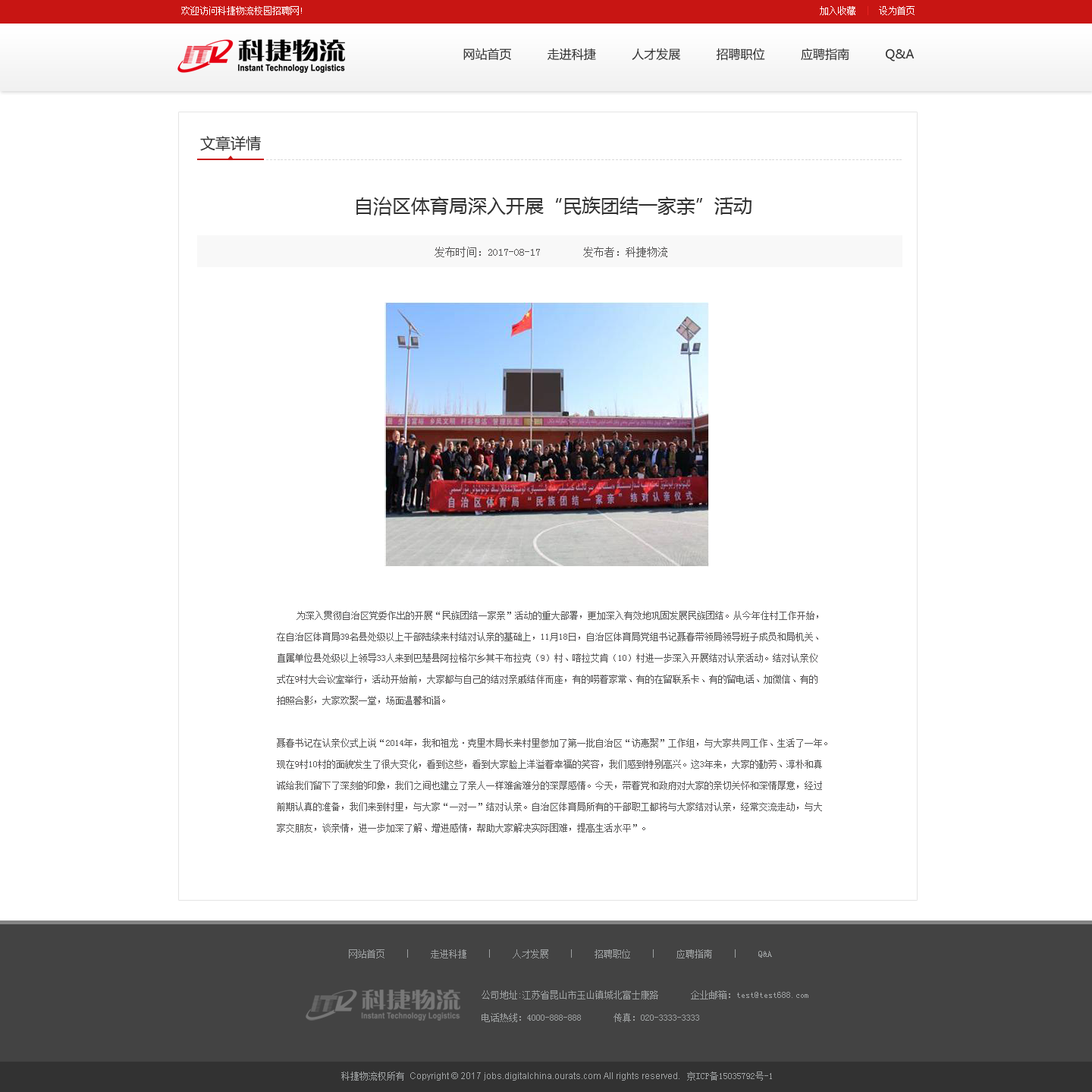
<style>
.page{position:relative;width:1092px;height:1092px;background:#ffffff}
.page>*{position:absolute;margin:0}
.t1{font:9.1px "SimSun";color:#ffffff}
.t2{font:9.1px "SimSun";color:#e62422}
.t3{font:12.1px "MicrosoftYaHei";color:#313131}
.t4{font:15.2px "MicrosoftYaHei";color:#333333}
.t5{font:6.1px "SimSun";letter-spacing:0.1em;color:#d9d9d9}
.t6{font:19px "MicrosoftYaHei";color:#313131}
.t7{font:10.6px "SimSun";color:#575656}
.t8{font:9.1px/21.2px "SimSun";color:#575656}
.t9{font:9.1px/21.2px "SimSun";color:#575656;font-weight:bold}
.t10{font:9.1px "SimSun";color:#9ea1a2}
.t11{font:9.1px/11.4px "SimSun";color:#9ea1a2}
.t12{font:9.1px "ArialMT";color:#9ea1a2}
</style>
<div class="page">
<p class="t1" style="left:181px;top:6px;width:121px;height:9px">欢迎访问科捷物流校园招聘网!</p>
<p class="t1" style="left:820px;top:6px;width:95px;height:9px">加入收藏<span class="t2">  |  </span>设为首页</p>
<p class="t3" style="left:463px;top:48px;width:452px;height:13px">网站首页          走进科捷          人才发展          招聘职位          应聘指南          Q&amp;A</p>
<p class="t4" style="left:200px;top:136px;width:61px;height:15px">文章详情</p>
<p class="t5" style="left:266px;top:159px;width:636px;height:1px">-------------------------------------------------------------------------------------------------------------------------------------------------------------------------------</p>
<p class="t6" style="left:357px;top:196px;width:395px;height:19px">自治区体育局深入开展“民族团结一家亲”活动</p>
<p class="t7" style="left:435px;top:247px;width:233px;height:10px">发布时间：2017-08-17        发布者：科捷物流</p>
<p class="t8" style="left:277px;top:611px;width:551px;height:221px"><span class="t9"><br>　　</span>为深入贯彻自治区党委作出的开展“民族团结一家亲”活动的重大部署，更加深入有效地巩固发展民族团结。从今年住村工作开始，<br>在自治区体育局39名县处级以上干部陆续来村结对认亲的基础上，11月18日，自治区体育局党组书记聂春带领局领导班子成员和局机关、<br>直属单位县处级以上领导33人来到巴楚县阿拉格尔乡其干布拉克（9）村、喀拉艾肯（10）村进一步深入开展结对认亲活动。结对认亲仪<br>式在9村大会议室举行，活动开始前，大家都与自己的结对亲戚结伴而座，有的唠着家常、有的在留联系卡、有的留电话、加微信、有的<br>拍照合影，大家欢聚一堂，场面温馨和谐。<br><br>聂春书记在认亲仪式上说“2014年，我和祖龙·克里木局长来村里参加了第一批自治区“访惠聚”工作组，与大家共同工作、生活了一年。<br>现在9村10村的面貌发生了很大变化，看到这些，看到大家脸上洋溢着幸福的笑容，我们感到特别高兴。这3年来，大家的勤劳、淳朴和真<br>诚给我们留下了深刻的印象，我们之间也建立了亲人一样难舍难分的深厚感情。今天，带着党和政府对大家的亲切关怀和深情厚意，经过<br>前期认真的准备，我们来到村里，与大家“一对一”结对认亲。自治区体育局所有的干部职工都将与大家结对认亲，经常交流走动，与大<br>家交朋友，谈亲情，进一步加深了解、增进感情，帮助大家解决实际困难，提高生活水平”。</p>
<p class="t10" style="left:349px;top:949px;width:423px;height:9px">网站首页　　｜　　走进科捷　　｜　　人才发展　　｜　　招聘职位　　｜　　应聘指南　　｜　　Q&amp;A</p>
<p class="t11" style="left:482px;top:990px;width:327px;height:32px">公司地址:江苏省昆山市玉山镇城北富士康路 　　　企业邮箱：test@test688.com<br><br>电话热线：4000-888-888 　　　传真：020-3333-3333</p>
<p class="t12" style="left:341px;top:1071px;width:431px;height:9px"><span class="t10">科捷物流权所有 </span>Copyright © 2017 jobs.digitalchina.ourats.com All rights reserved.   <span class="t10">京ICP备15035792号-1</span></p>
</div>
